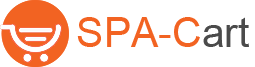
<style>
.page{position:relative;width:255px;height:67px;background:#ffffff}
.page>*{position:absolute;margin:0}
.t1{font:41px "ArialMT";color:#f26322}
.t2{font:41px "ArialMT";color:#4b4b4b}
</style>
<div class="page">
<p class="t1" style="left:77px;top:17px;width:172px;height:30px">SPA-C<span class="t2">art</span></p>
</div>
